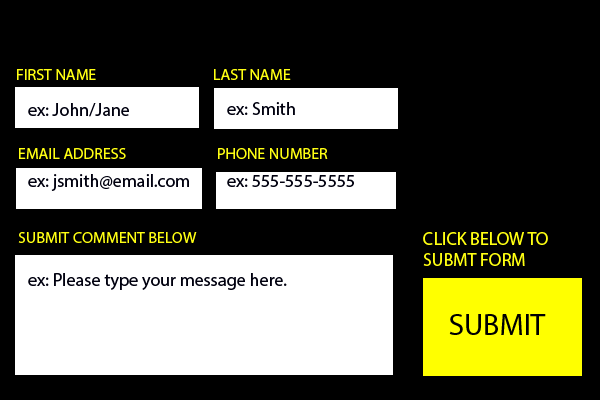
<style>
.page{position:relative;width:600px;height:400px;background:#000000}
.page>*{position:absolute;margin:0}
.t1{font:16px "MyriadPro-Regular";color:#ffff13}
.t2{font:18px "MyriadPro-Regular";color:#01010f}
.t3{font:18px "MyriadPro-Regular";color:#ffff12}
.t4{font:30px "MyriadPro-Regular";color:#000002}
</style>
<div class="page">
<p class="t1" style="left:17px;top:69px;width:79px;height:11px">FIRST NAME</p>
<p class="t1" style="left:214px;top:69px;width:77px;height:11px">LAST NAME</p>
<p class="t2" style="left:227px;top:102px;width:68px;height:13px">ex: Smith</p>
<p class="t2" style="left:28px;top:103px;width:101px;height:14px">ex: John/Jane</p>
<p class="t1" style="left:19px;top:148px;width:107px;height:11px">EMAIL ADDRESS</p>
<p class="t1" style="left:218px;top:148px;width:110px;height:11px">PHONE NUMBER</p>
<p class="t2" style="left:28px;top:174px;width:161px;height:17px">ex: jsmith@email.com</p>
<p class="t2" style="left:227px;top:175px;width:127px;height:12px">ex: 555-555-5555</p>
<p class="t1" style="left:18px;top:232px;width:179px;height:11px">SUBMIT COMMENT BELOW</p>
<p class="t3" style="left:423px;top:232px;width:125px;height:34px">CLICK BELOW TO SUBMT FORM</p>
<p class="t2" style="left:28px;top:273px;width:259px;height:17px">ex: Please type your message here.</p>
<p class="t4" style="left:449px;top:314px;width:97px;height:21px">SUBMIT</p>
</div>
